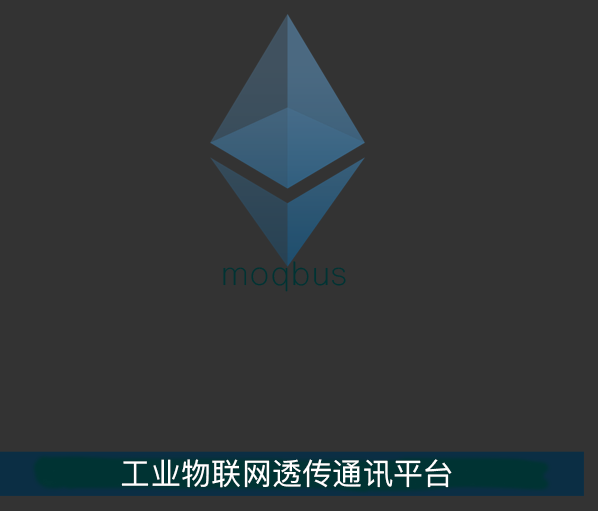
<style>
.page{position:relative;width:598px;height:511px;background:#333333}
.page>*{position:absolute;margin:0}
.t1{font:32px "ShreeDev0714";letter-spacing:0.05em;color:#003333}
.t2{font:30px "PingFangSC-Regular";letter-spacing:0.01em;color:#ffffff}
</style>
<div class="page">
<p class="t1" style="left:223px;top:261px;width:123px;height:31px">moqbus</p>
<p class="t2" style="left:121px;top:459px;width:331px;height:29px">工业物联网透传通讯平台</p>
</div>
